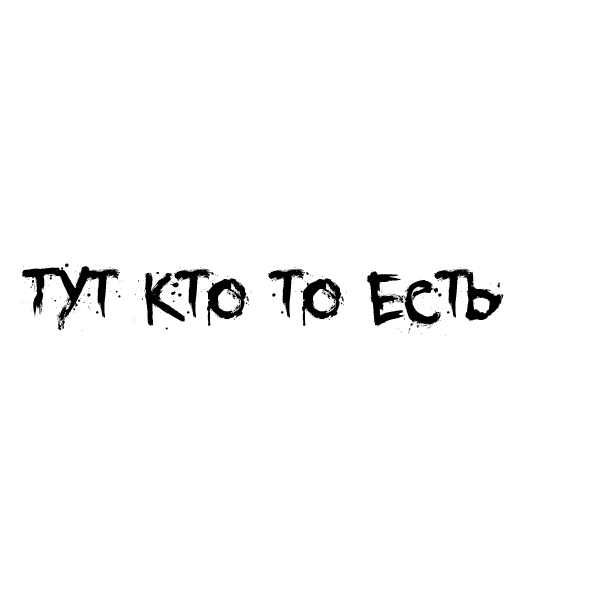
<style>
.page{position:relative;width:600px;height:600px;background:#ffffff}
.page>*{position:absolute;margin:0}
.t1{font:100px "YouMurdererBB";color:#000000}
</style>
<div class="page">
<p class="t1" style="left:21px;top:261px;width:535px;height:75px">Тут кто то есть</p>
</div>
